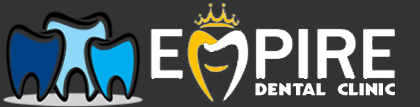
<style>
.page{position:relative;width:420px;height:107px;background:#333333}
.page>*{position:absolute;margin:0}
.t1{font:15.1px "NHLToronto";color:#ffffff;scale:1.41 1}
</style>
<div class="page">
<p class="t1" style="left:255px;top:83px;width:140px;height:13px">DENTAL CLINIC</p>
</div>
